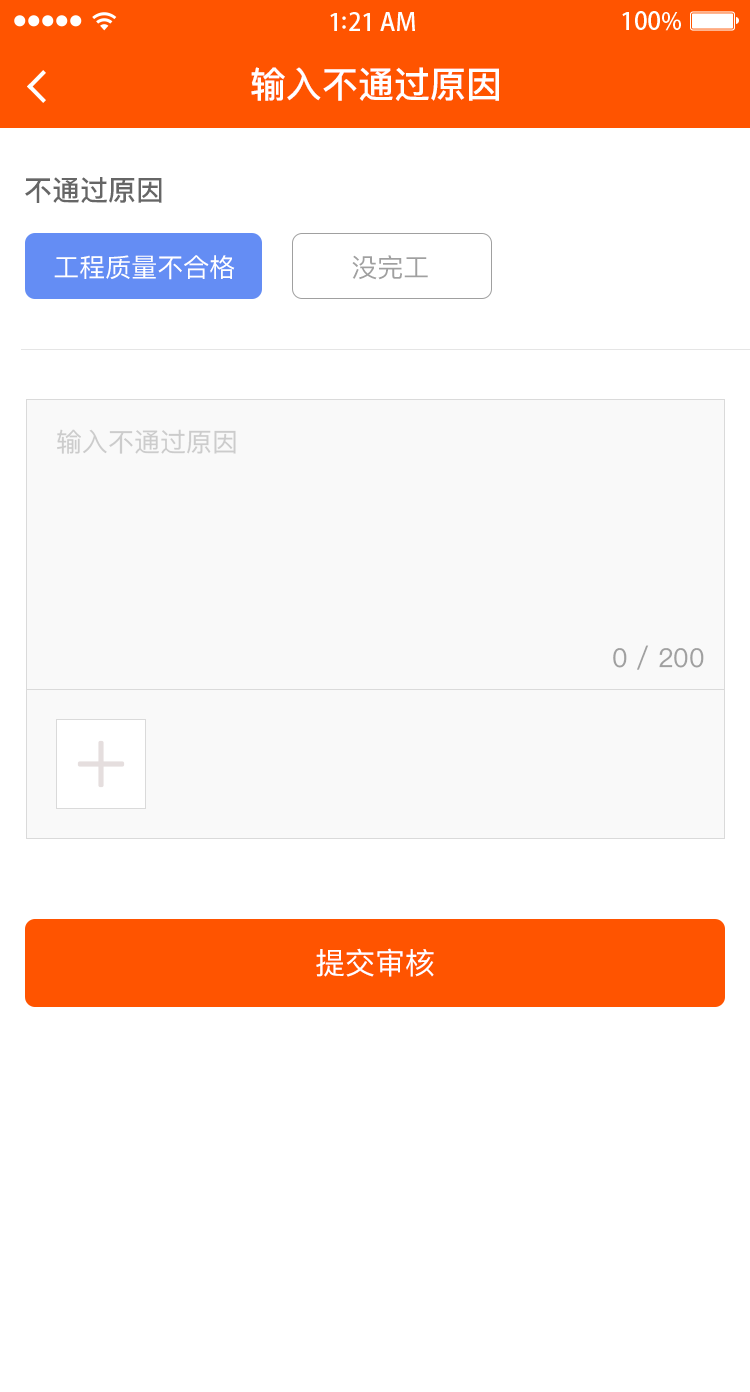
<style>
.page{position:relative;width:750px;height:1392px;background:#ffffff}
.page>*{position:absolute;margin:0}
.t1{font:36px "PingFangSC-Medium";color:#ffffff}
.t2{font:28px "PingFangSC-Medium";color:#666666}
.t3{font:26px "PingFangSC-Regular";color:#ffffff;text-transform:uppercase}
.t4{font:26px "PingFangSC-Regular";color:#a0a0a0;text-transform:uppercase}
.t5{font:26px "PingFangSC-Regular";color:#cccccc}
.t6{font:26px "PingFangSC-Regular";color:#a0a0a0}
.t7{font:30px "PingFangSC-Regular";color:#ffffff;text-transform:uppercase}
</style>
<div class="page">
<p class="t1" style="left:251px;top:67px;width:248px;height:34px">输入不通过原因</p>
<p class="t2" style="left:25px;top:177px;width:137px;height:26px">不通过原因</p>
<p class="t3" style="left:54px;top:255px;width:181px;height:25px">工程质量不合格</p>
<p class="t4" style="left:352px;top:255px;width:76px;height:25px">没完工</p>
<p class="t5" style="left:57px;top:429px;width:179px;height:25px">输入不通过原因</p>
<p class="t6" style="left:613px;top:645px;width:91px;height:25px">0 / 200</p>
<p class="t7" style="left:316px;top:948px;width:118px;height:29px">提交审核</p>
</div>
